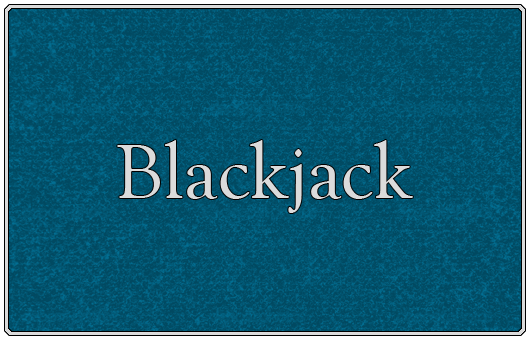
<style>
.page{position:relative;width:530px;height:340px}
.page>*{position:absolute;margin:0}
.t1{font:80px "GoudyOldStyleT-Regular";color:#dbdbdb}
</style>
<div class="page">
<p class="t1" style="left:117px;top:140px;width:296px;height:73px">Blackjack</p>
</div>
